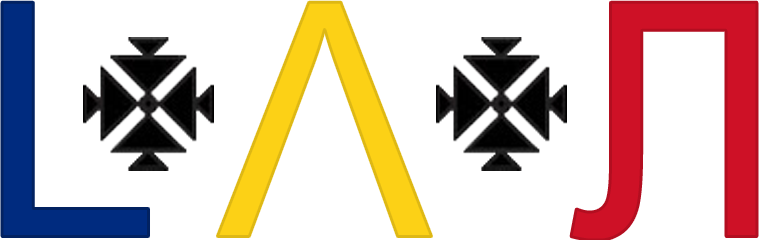
<style>
.page{position:relative;width:759px;height:240px;background:#ffffff}
.page>*{position:absolute;margin:0}
.t1{font:326.6px "ArialMT";color:#002b7f}
.t2{font:326.6px "ArialMT";color:#fcd116}
.t3{font:326.6px "ArialMT";color:#ce1126}
</style>
<div class="page">
<p class="t1" style="left:2px;top:2px;width:147px;height:235px">L</p>
<p class="t2" style="left:217px;top:2px;width:215px;height:235px">Λ</p>
<p class="t3" style="left:571px;top:2px;width:186px;height:238px">Л</p>
</div>
